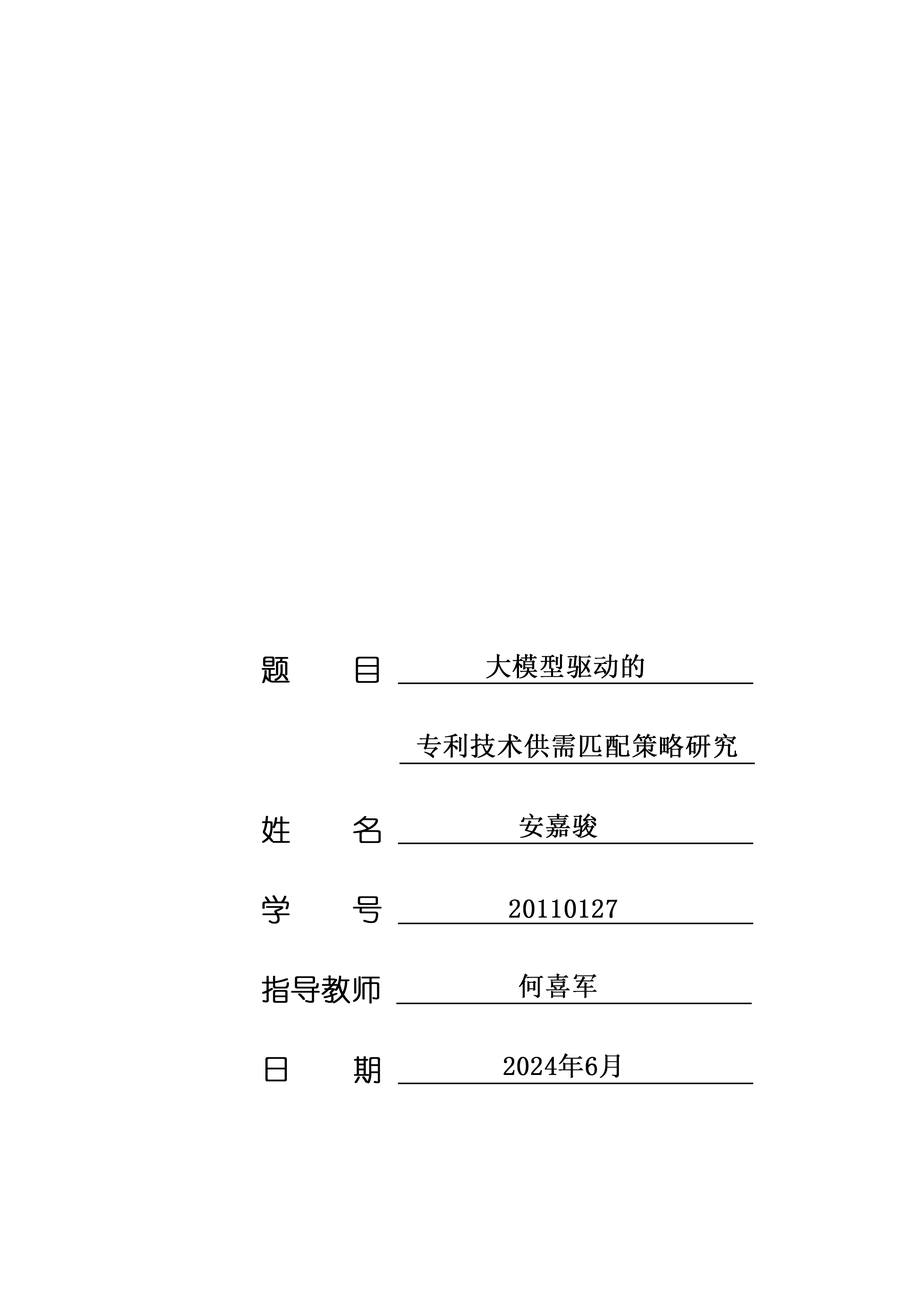
<style>
.page{position:relative;width:918px;height:1299px;background:#ffffff}
.page>*{position:absolute;margin:0}
.t1{font:26.2px "SimSun";color:#000000;font-weight:bold}
</style>
<div class="page">
<p class="t1" style="left:486px;top:653px;width:158px;height:26px">大模型驱动的</p>
<p class="t1" style="left:417px;top:733px;width:320px;height:25px">专利技术供需匹配策略研究</p>
<p class="t1" style="left:519px;top:813px;width:79px;height:25px">安嘉骏</p>
<p class="t1" style="left:509px;top:899px;width:109px;height:19px">20110127</p>
<p class="t1" style="left:519px;top:973px;width:78px;height:25px">何喜军</p>
<p class="t1" style="left:504px;top:1053px;width:116px;height:25px">2024年6月</p>
</div>
